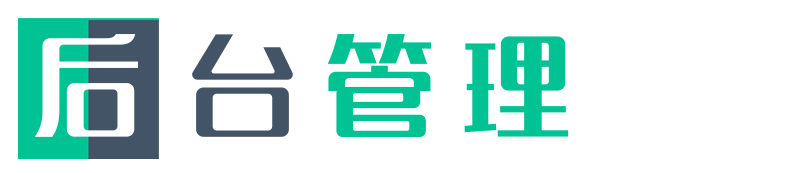
<style>
.page{position:relative;width:800px;height:173px;background:#ffffff}
.page>*{position:absolute;margin:0}
.t1{font:109px "MFLangQian_Noncommercial-Regular";letter-spacing:0.04em;color:#ffffff}
.t2{font:109px "MFLangQian_Noncommercial-Regular";letter-spacing:0.04em;color:#435466}
.t3{font:109px "MFLangQian_Noncommercial-Regular";letter-spacing:0.04em;color:#00c292}
</style>
<div class="page">
<p class="t1" style="left:34px;top:34px;width:104px;height:103px">后</p>
<p class="t2" style="left:192px;top:34px;width:101px;height:103px">台</p>
<p class="t3" style="left:327px;top:34px;width:105px;height:103px">管</p>
<p class="t3" style="left:464px;top:36px;width:105px;height:101px">理</p>
</div>
